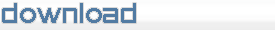
<style>
.page{position:relative;width:275px;height:30px}
.page>*{position:absolute;margin:0}
.t1{font:26px "Zeroes";color:#517ba3}
</style>
<div class="page">
<p class="t1" style="left:2px;top:3px;width:134px;height:20px">download</p>
</div>
